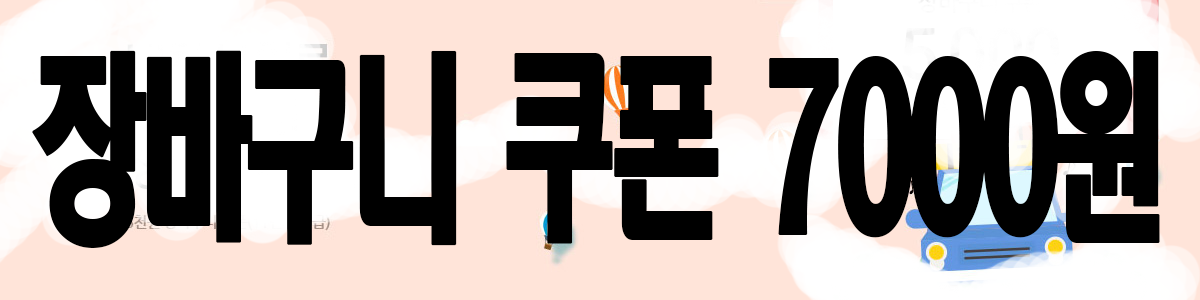
<style>
.page{position:relative;width:1200px;height:300px;background:#000000}
.page>*{position:absolute;margin:0}
.t1{font:200.5px "HeadlineR-HM";letter-spacing:-0.12em;color:#000000;font-weight:bold;scale:0.58 1}
</style>
<div class="page">
<p class="t1" style="left:32px;top:50px;width:1128px;height:198px">장바구니 쿠폰 7000원</p>
</div>
